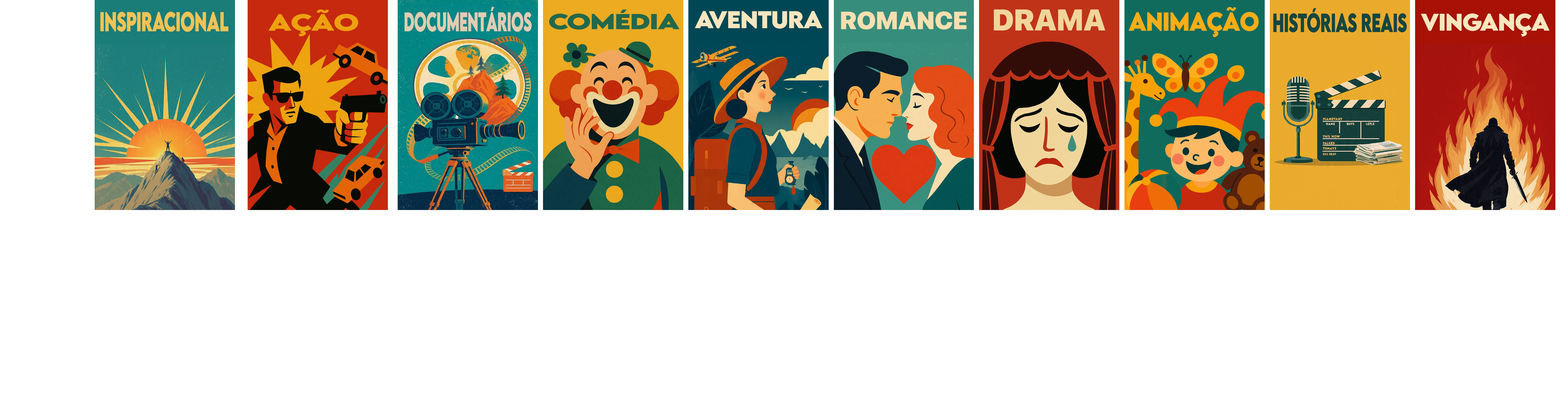
<style>
.page{position:relative;width:1568px;height:420px;background:#ffffff}
.page>*{position:absolute;margin:0}
.t1{font:24.2px "LEMONMILK-Bold";letter-spacing:-0.04em;color:#f1c356;text-transform:uppercase;font-weight:bold;scale:0.64 1}
.t2{font:20.5px "LEMONMILK-Bold";letter-spacing:-0.04em;color:#eda110;text-transform:uppercase;font-weight:bold;scale:1.33 1}
.t3{font:23.8px "LEMONMILK-Bold";letter-spacing:-0.04em;color:#dfcdb3;text-transform:uppercase;font-weight:bold;scale:0.57 1}
.t4{font:19.2px "LEMONMILK-Bold";letter-spacing:-0.04em;color:#22684b;text-transform:uppercase;font-weight:bold;scale:1.34 1}
.t5{font:21.3px "LEMONMILK-Bold";letter-spacing:-0.04em;color:#f7e6be;text-transform:uppercase;font-weight:bold;scale:1.05 1}
.t6{font:22.9px "LEMONMILK-Bold";letter-spacing:-0.04em;color:#faad16;text-transform:uppercase;font-weight:bold;scale:0.92 1}
.t7{font:23.3px "LEMONMILK-Bold";letter-spacing:-0.04em;color:#144641;text-transform:uppercase;font-weight:bold;scale:0.64 1}
.t8{font:21.1px "LEMONMILK-Bold";letter-spacing:-0.04em;color:#f7e6be;text-transform:uppercase;font-weight:bold}
</style>
<div class="page">
<p class="t1" style="left:100px;top:11px;width:129px;height:21px">Inspiracional</p>
<p class="t2" style="left:268px;top:9px;width:90px;height:27px">AÇÃO</p>
<p class="t3" style="left:404px;top:7px;width:128px;height:25px">Documentários</p>
<p class="t4" style="left:549px;top:10px;width:130px;height:20px">Comédia</p>
<p class="t5" style="left:695px;top:11px;width:128px;height:18px">AVENTURA</p>
<p class="t6" style="left:1129px;top:7px;width:130px;height:30px">Animação</p>
<p class="t7" style="left:1273px;top:8px;width:134px;height:24px">Histórias Reais</p>
<p class="t8" style="left:1421px;top:13px;width:129px;height:24px">VINGANÇA</p>
</div>
